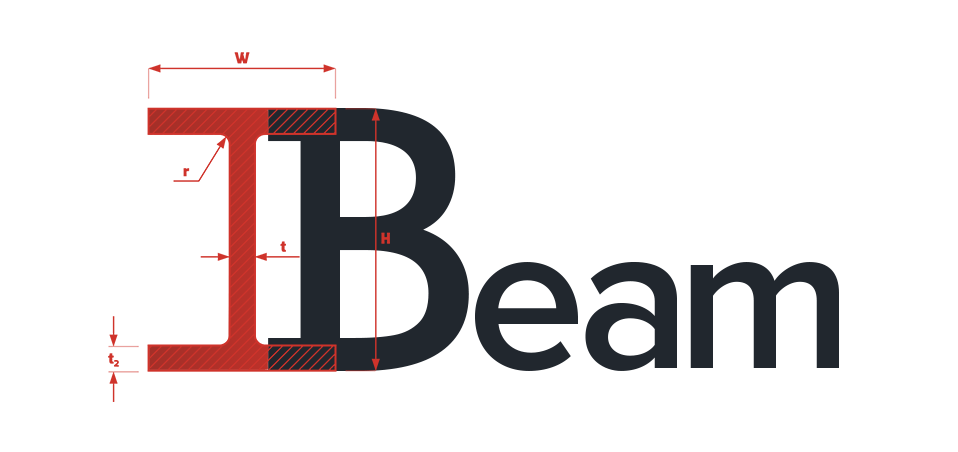
<style>
.page{position:relative;width:958px;height:452px;background:#ffffff}
.page>*{position:absolute;margin:0}
.t1{font:357.4px "RockwellNova";letter-spacing:0.01em;color:#21272e}
.t2{font:213px "ProximaNova-Semibold";letter-spacing:0.01em;color:#21272e}
</style>
<div class="page">
<p class="t1" style="left:268px;top:108px;width:201px;height:263px">B</p>
<p class="t2" style="left:475px;top:262px;width:103px;height:109px">e</p>
<p class="t2" style="left:585px;top:261px;width:92px;height:110px">a</p>
<p class="t2" style="left:690px;top:262px;width:149px;height:106px">m</p>
</div>
